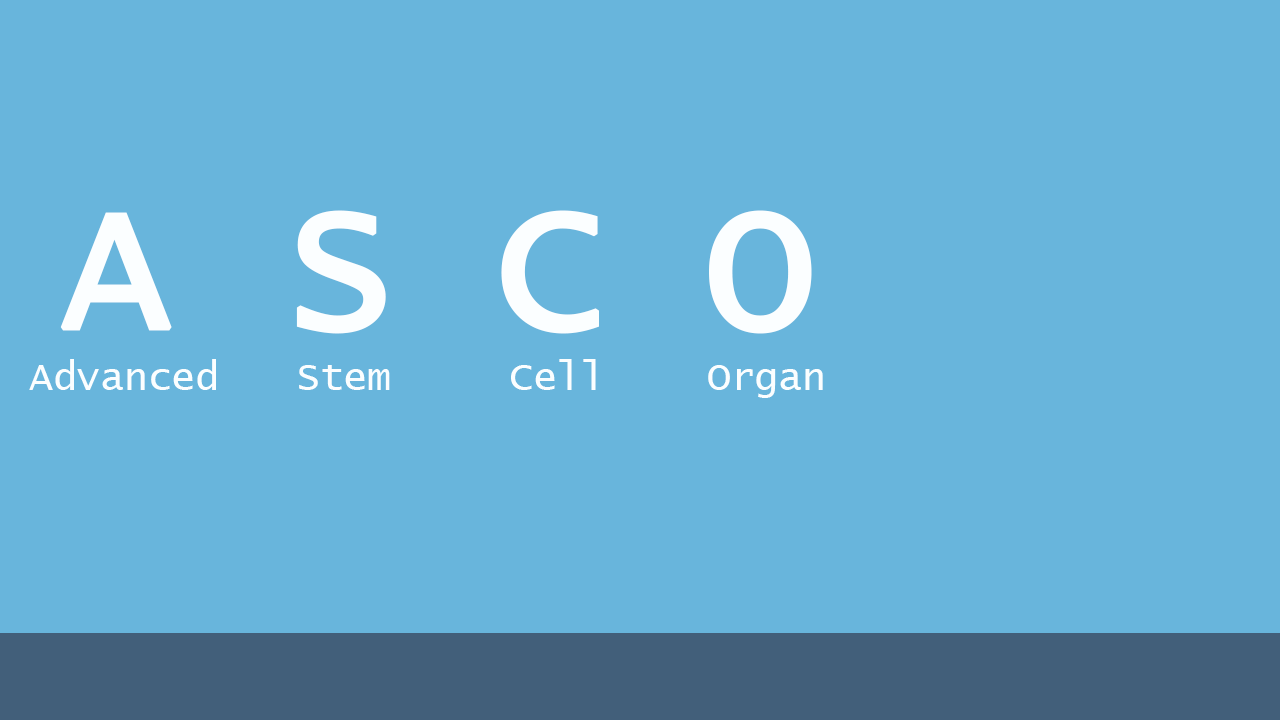
<style>
.page{position:relative;width:1280px;height:720px;background:#68b5dc}
.page>*{position:absolute;margin:0}
.t1{font:180px "LucidaConsole";letter-spacing:-0.01em;color:#fbfeff;font-weight:bold}
.t2{font:40px "LucidaConsole";letter-spacing:-0.01em;color:#fbfeff}
</style>
<div class="page">
<p class="t1" style="left:60px;top:210px;width:752px;height:124px">A S C O</p>
<p class="t2" style="left:29px;top:359px;width:187px;height:31px">Advanced</p>
<p class="t2" style="left:299px;top:365px;width:91px;height:25px">Stem</p>
<p class="t2" style="left:511px;top:359px;width:85px;height:31px">Cell</p>
<p class="t2" style="left:708px;top:365px;width:115px;height:33px">Organ</p>
</div>
